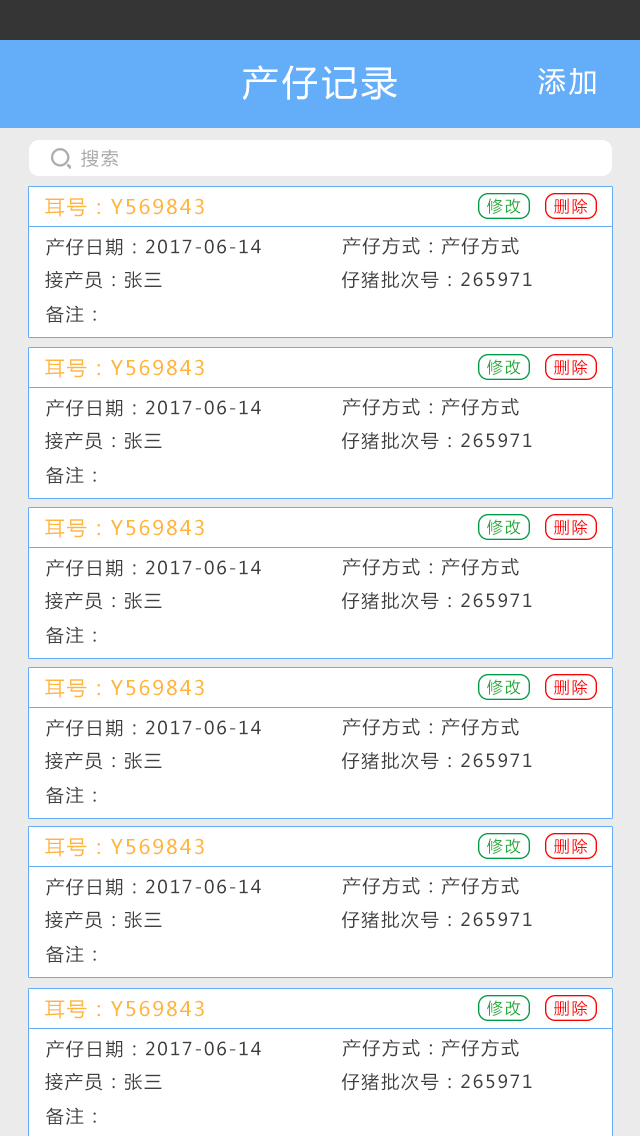
<style>
.page{position:relative;width:640px;height:1136px;background:#ffffff}
.page>*{position:absolute;margin:0}
.t1{font:36px "MicrosoftYaHei";letter-spacing:0.1em;color:#ffffff}
.t2{font:28px "MicrosoftYaHei";letter-spacing:0.1em;color:#ffffff}
.t3{font:18px "MicrosoftYaHei";letter-spacing:0.1em;color:#aaaaaa}
.t4{font:20px "MicrosoftYaHei";letter-spacing:0.1em;color:#ffb537}
.t5{font:16px "MicrosoftYaHei";letter-spacing:0.1em;color:#22ac38}
.t6{font:16px "MicrosoftYaHei";letter-spacing:0.1em;color:#ff0000}
.t7{font:18px "MicrosoftYaHei";letter-spacing:0.1em;color:#3f3f3f}
</style>
<div class="page">
<p class="t1" style="left:242px;top:65px;width:155px;height:35px">产仔记录</p>
<p class="t2" style="left:538px;top:68px;width:58px;height:27px">添加</p>
<p class="t3" style="left:81px;top:149px;width:38px;height:18px">搜索</p>
<p class="t4" style="left:45px;top:198px;width:159px;height:19px">耳号：Y569843</p>
<p class="t5" style="left:487px;top:198px;width:34px;height:16px">修改</p>
<p class="t6" style="left:554px;top:198px;width:34px;height:16px">删除</p>
<p class="t7" style="left:46px;top:238px;width:215px;height:18px">产仔日期：2017-06-14</p>
<p class="t7" style="left:342px;top:237px;width:177px;height:18px">产仔方式：产仔方式</p>
<p class="t7" style="left:45px;top:270px;width:117px;height:19px">接产员：张三</p>
<p class="t7" style="left:341px;top:271px;width:191px;height:18px">仔猪批次号：265971</p>
<p class="t7" style="left:46px;top:305px;width:50px;height:18px">备注：</p>
<p class="t4" style="left:45px;top:359px;width:159px;height:19px">耳号：Y569843</p>
<p class="t5" style="left:487px;top:359px;width:34px;height:16px">修改</p>
<p class="t6" style="left:554px;top:359px;width:34px;height:16px">删除</p>
<p class="t7" style="left:46px;top:399px;width:215px;height:18px">产仔日期：2017-06-14</p>
<p class="t7" style="left:342px;top:398px;width:177px;height:18px">产仔方式：产仔方式</p>
<p class="t7" style="left:45px;top:431px;width:117px;height:19px">接产员：张三</p>
<p class="t7" style="left:341px;top:432px;width:191px;height:18px">仔猪批次号：265971</p>
<p class="t7" style="left:46px;top:466px;width:50px;height:18px">备注：</p>
<p class="t4" style="left:45px;top:519px;width:159px;height:19px">耳号：Y569843</p>
<p class="t5" style="left:487px;top:519px;width:34px;height:16px">修改</p>
<p class="t6" style="left:554px;top:519px;width:34px;height:16px">删除</p>
<p class="t7" style="left:342px;top:558px;width:177px;height:18px">产仔方式：产仔方式</p>
<p class="t7" style="left:46px;top:559px;width:215px;height:18px">产仔日期：2017-06-14</p>
<p class="t7" style="left:45px;top:591px;width:117px;height:19px">接产员：张三</p>
<p class="t7" style="left:341px;top:592px;width:191px;height:18px">仔猪批次号：265971</p>
<p class="t7" style="left:46px;top:626px;width:50px;height:18px">备注：</p>
<p class="t4" style="left:45px;top:679px;width:159px;height:19px">耳号：Y569843</p>
<p class="t5" style="left:487px;top:679px;width:34px;height:16px">修改</p>
<p class="t6" style="left:554px;top:679px;width:34px;height:16px">删除</p>
<p class="t7" style="left:46px;top:719px;width:215px;height:18px">产仔日期：2017-06-14</p>
<p class="t7" style="left:342px;top:718px;width:177px;height:18px">产仔方式：产仔方式</p>
<p class="t7" style="left:45px;top:751px;width:117px;height:19px">接产员：张三</p>
<p class="t7" style="left:341px;top:752px;width:191px;height:18px">仔猪批次号：265971</p>
<p class="t7" style="left:46px;top:786px;width:50px;height:18px">备注：</p>
<p class="t4" style="left:45px;top:838px;width:159px;height:19px">耳号：Y569843</p>
<p class="t5" style="left:487px;top:838px;width:34px;height:16px">修改</p>
<p class="t6" style="left:554px;top:838px;width:34px;height:16px">删除</p>
<p class="t7" style="left:46px;top:878px;width:215px;height:18px">产仔日期：2017-06-14</p>
<p class="t7" style="left:342px;top:877px;width:177px;height:18px">产仔方式：产仔方式</p>
<p class="t7" style="left:45px;top:910px;width:117px;height:19px">接产员：张三</p>
<p class="t7" style="left:341px;top:911px;width:191px;height:18px">仔猪批次号：265971</p>
<p class="t7" style="left:46px;top:945px;width:50px;height:18px">备注：</p>
<p class="t4" style="left:45px;top:1000px;width:159px;height:19px">耳号：Y569843</p>
<p class="t5" style="left:487px;top:1000px;width:34px;height:16px">修改</p>
<p class="t6" style="left:554px;top:1000px;width:34px;height:16px">删除</p>
<p class="t7" style="left:46px;top:1040px;width:215px;height:18px">产仔日期：2017-06-14</p>
<p class="t7" style="left:342px;top:1039px;width:177px;height:18px">产仔方式：产仔方式</p>
<p class="t7" style="left:45px;top:1072px;width:117px;height:19px">接产员：张三</p>
<p class="t7" style="left:341px;top:1073px;width:191px;height:18px">仔猪批次号：265971</p>
<p class="t7" style="left:46px;top:1107px;width:50px;height:18px">备注：</p>
</div>
